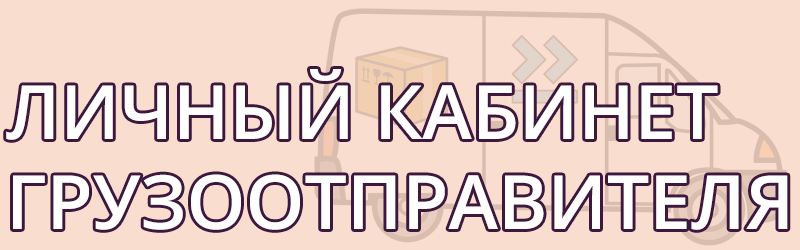
<style>
.page{position:relative;width:800px;height:250px;background:#f9decf}
.page>*{position:absolute;margin:0}
.t1{font:75px "OpenSans-SemiBold";color:#ffffff}
</style>
<div class="page">
<p class="t1" style="left:6px;top:69px;width:782px;height:161px">ЛИЧНЫЙ КАБИНЕТ<br>ГРУЗООТПРАВИТЕЛЯ</p>
</div>
